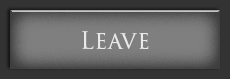
<style>
.page{position:relative;width:230px;height:79px;background:#333333}
.page>*{position:absolute;margin:0}
.t1{font:24px "TrajanPro3-Regular";color:#e9e9e9}
</style>
<div class="page">
<p class="t1" style="left:82px;top:31px;width:67px;height:18px">Leave</p>
</div>
